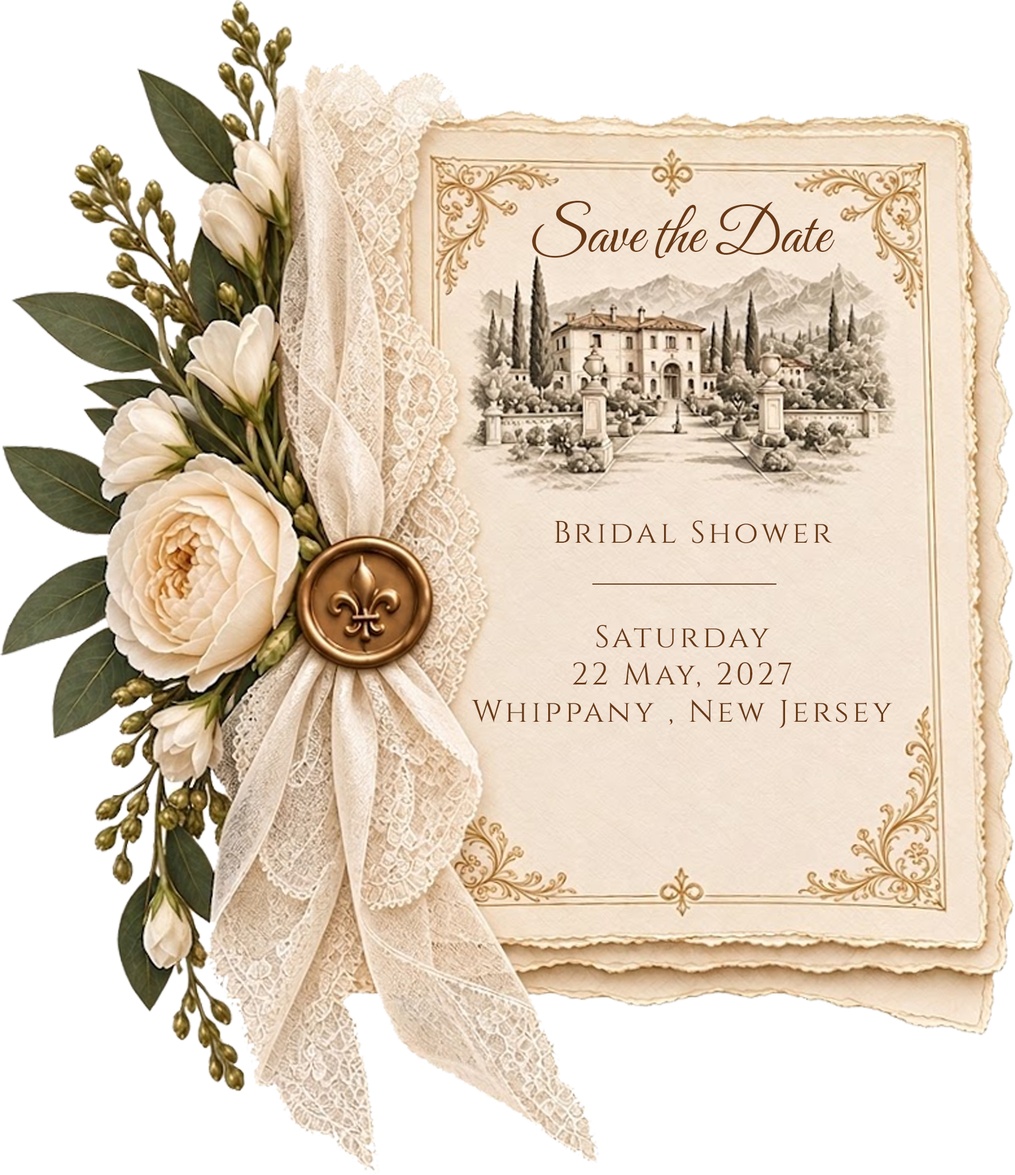
<style>
.page{position:relative;width:1015px;height:1175px;background:#ffffff}
.page>*{position:absolute;margin:0}
.t1{font:61.9px "GreatVibes-Regular";color:#693915}
.t2{font:31.1px "Cinzel-Regular";letter-spacing:0.1em;color:#693915}
</style>
<div class="page">
<p class="t1" style="left:532px;top:201px;width:303px;height:57px">Save the Date</p>
<p class="t2" style="left:555px;top:520px;width:277px;height:23px">Bridal Shower</p>
<p class="t2" style="left:471px;top:625px;width:421px;height:103px;text-align:center">Saturday<br>22 May, 2027<br>Whippany , New Jersey</p>
</div>
